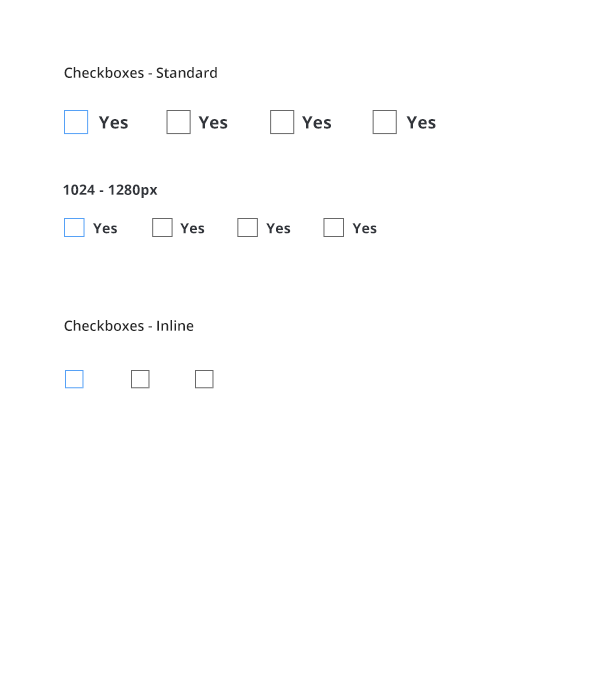
<style>
.page{position:relative;width:600px;height:700px;background:#ffffff}
.page>*{position:absolute;margin:0}
.t1{font:14px "OpenSans-Semibold";color:#282828}
.t2{font:17px "OpenSans-Bold";letter-spacing:0.015em;color:#32353b}
.t3{font:14px "OpenSans-Bold";letter-spacing:0.015em;color:#32353b}
</style>
<div class="page">
<p class="t1" style="left:64px;top:67px;width:153px;height:11px">Checkboxes - Standard</p>
<p class="t2" style="left:98px;top:116px;width:30px;height:13px">Yes</p>
<p class="t2" style="left:198px;top:116px;width:30px;height:13px">Yes</p>
<p class="t2" style="left:302px;top:116px;width:29px;height:13px">Yes</p>
<p class="t2" style="left:406px;top:116px;width:30px;height:13px">Yes</p>
<p class="t3" style="left:63px;top:184px;width:95px;height:14px">1024 - 1280px</p>
<p class="t3" style="left:93px;top:223px;width:24px;height:11px">Yes</p>
<p class="t3" style="left:180px;top:223px;width:25px;height:11px">Yes</p>
<p class="t3" style="left:266px;top:223px;width:25px;height:11px">Yes</p>
<p class="t3" style="left:352px;top:223px;width:25px;height:11px">Yes</p>
<p class="t1" style="left:64px;top:320px;width:130px;height:11px">Checkboxes - Inline</p>
</div>
